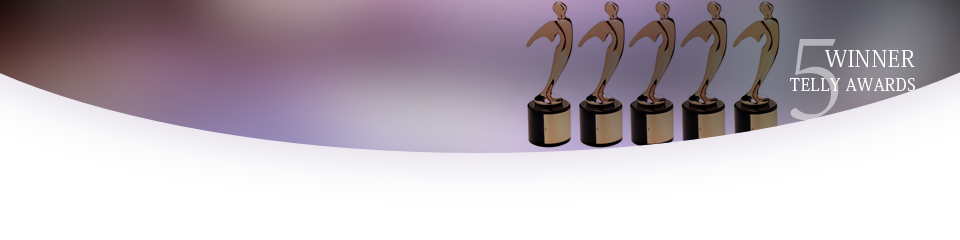
<style>
.page{position:relative;width:960px;height:240px;background:#ffffff}
.page>*{position:absolute;margin:0}
.t1{font:133.3px "AdobeSongStd-Light";letter-spacing:0.022em;color:#b9b8bd}
.t2{font:22.2px "AdobeKaitiStd-Regular";letter-spacing:0.022em;color:#ffffff;text-transform:uppercase}
.t3{font:16.7px "AdobeKaitiStd-Regular";letter-spacing:0.022em;color:#ffffff;text-transform:uppercase}
</style>
<div class="page">
<p class="t1" style="left:790px;top:39px;width:49px;height:81px">5</p>
<p class="t2" style="left:825px;top:50px;width:90px;height:18px">Winner</p>
<p class="t3" style="left:789px;top:78px;width:126px;height:13px">Telly Awards</p>
</div>
